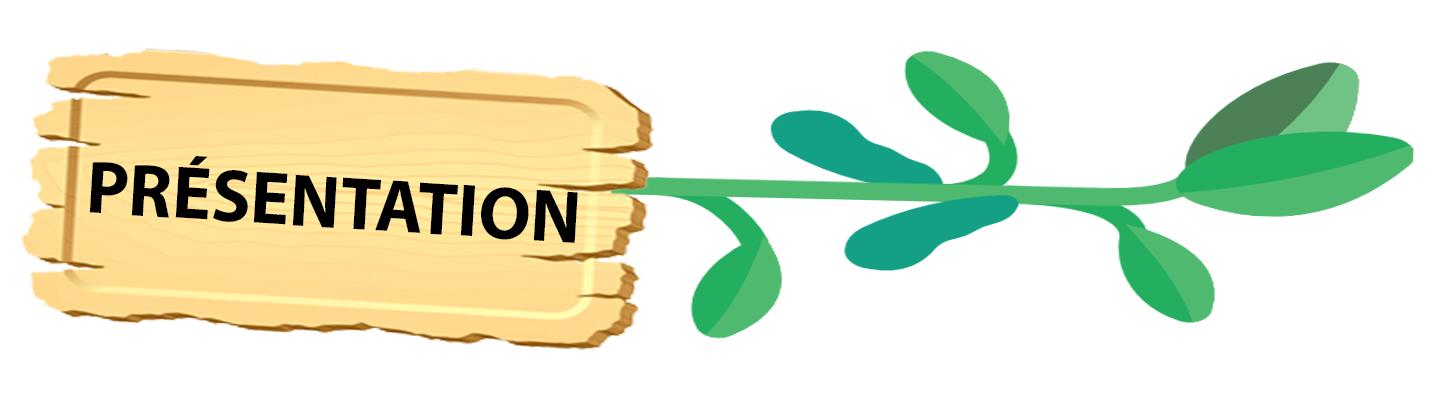
<style>
.page{position:relative;width:1446px;height:401px;background:#ffffff}
.page>*{position:absolute;margin:0}
.t1{font:75px "MyriadPro-Bold";color:#000000}
</style>
<div class="page">
<p class="t1" style="left:89px;top:156px;width:489px;height:87px;rotate:4deg">PRÉSENTATION</p>
</div>
